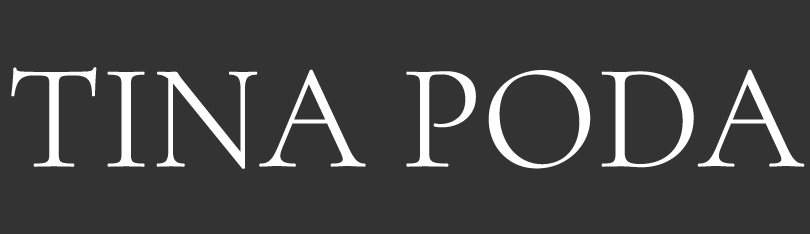
<style>
.page{position:relative;width:810px;height:234px;background:#333333}
.page>*{position:absolute;margin:0}
.t1{font:150px "CormorantGaramond-Light";letter-spacing:-0.025em;color:#ffffff;font-weight:bold}
</style>
<div class="page">
<p class="t1" style="left:11px;top:67px;width:794px;height:102px">TINA PODA</p>
</div>
